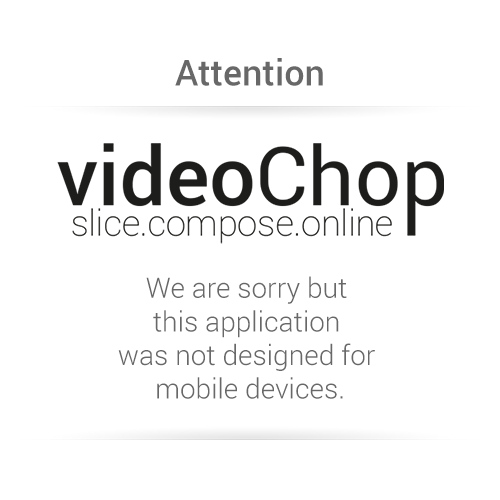
<style>
.page{position:relative;width:500px;height:500px;background:#ffffff}
.page>*{position:absolute;margin:0}
.t1{font:36px "Roboto-Medium";color:#686868}
.t2{font:28px "Roboto-Light";color:#686868}
</style>
<div class="page">
<p class="t1" style="left:175px;top:58px;width:148px;height:28px">Attention</p>
<p class="t2" style="left:118px;top:276px;width:257px;height:123px;text-align:center">We are sorry but <br>this application <br>was not designed for <br>mobile devices.</p>
</div>
